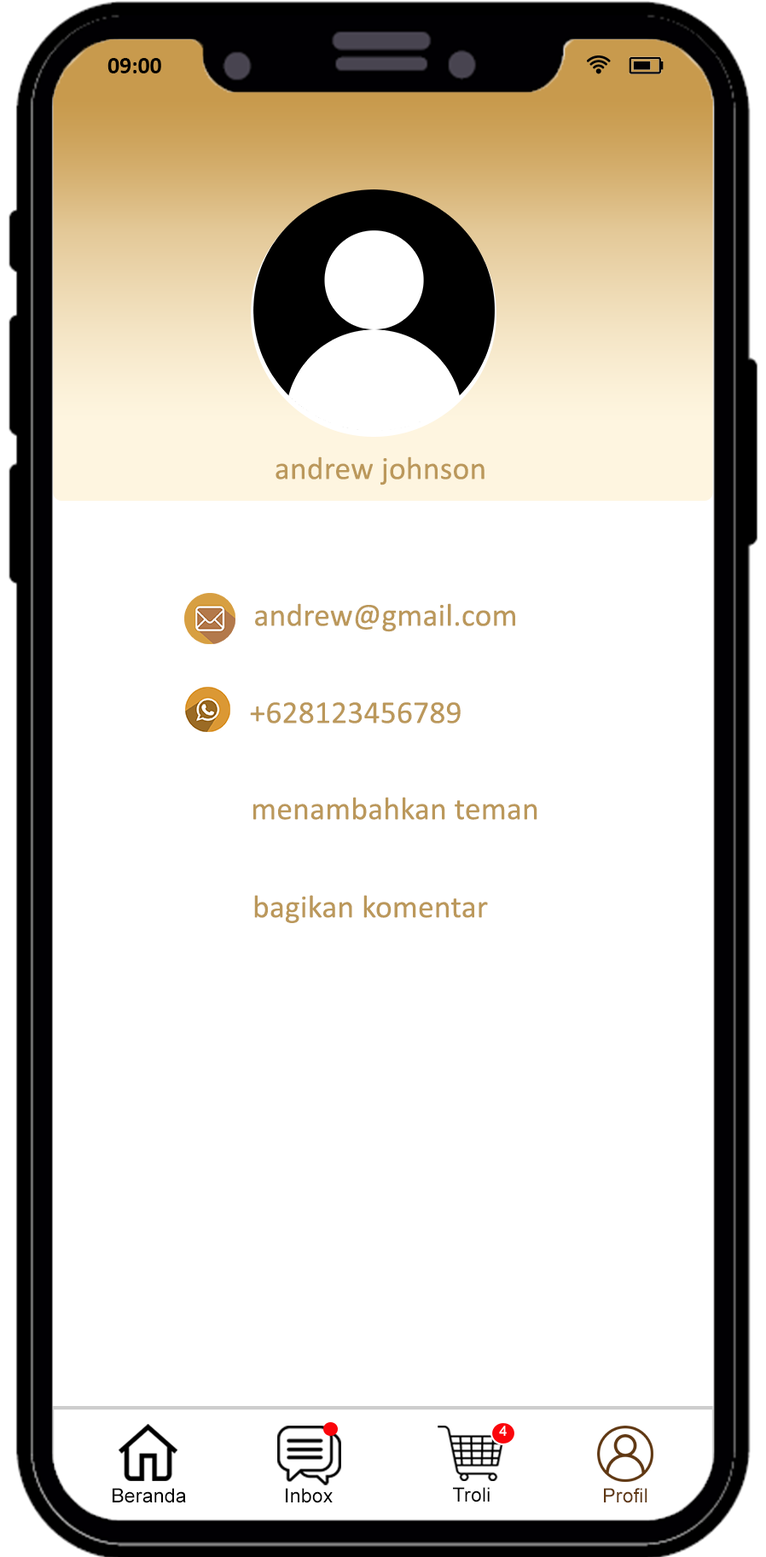
<style>
.page{position:relative;width:766px;height:1557px;background:#ffffff}
.page>*{position:absolute;margin:0}
.t1{font:23.6px "Calibri-Bold";color:#000000}
.t2{font:32px "Calibri";letter-spacing:0.005em;color:#bb985b}
.t3{font:14.2px "ArialMT";letter-spacing:0.01em;color:#ffffff}
.t4{font:19.6px "ArialMT";letter-spacing:0.01em;color:#000000}
.t5{font:19.6px "ArialMT";letter-spacing:0.01em;color:#603813}
</style>
<div class="page">
<p class="t1" style="left:107px;top:58px;width:54px;height:15px">09:00</p>
<p class="t2" style="left:276px;top:456px;width:209px;height:29px">andrew johnson</p>
<p class="t2" style="left:255px;top:603px;width:260px;height:29px">andrew@gmail.com</p>
<p class="t2" style="left:250px;top:702px;width:211px;height:21px">+628123456789</p>
<p class="t2" style="left:253px;top:797px;width:284px;height:23px">menambahkan teman</p>
<p class="t2" style="left:254px;top:895px;width:234px;height:28px">bagikan komentar</p>
<p class="t3" style="left:499px;top:1425px;width:8px;height:11px">4</p>
<p class="t3" style="left:499px;top:1425px;width:8px;height:11px">4</p>
<p class="t4" style="left:113px;top:1488px;width:73px;height:15px">Beranda</p>
<p class="t4" style="left:113px;top:1488px;width:73px;height:15px">Beranda</p>
<p class="t4" style="left:286px;top:1488px;width:47px;height:15px">Inbox</p>
<p class="t4" style="left:286px;top:1488px;width:47px;height:15px">Inbox</p>
<p class="t4" style="left:453px;top:1487px;width:37px;height:15px">Troli</p>
<p class="t4" style="left:453px;top:1487px;width:37px;height:15px">Troli</p>
<p class="t5" style="left:604px;top:1488px;width:43px;height:15px">Profil</p>
<p class="t5" style="left:604px;top:1488px;width:43px;height:15px">Profil</p>
</div>
